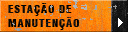
<style>
.page{position:relative;width:128px;height:32px}
.page>*{position:absolute;margin:0}
.t1{font:11px/14px "HelveticaLT-Condensed-Black";letter-spacing:0.08em;color:#000000}
</style>
<div class="page">
<p class="t1" style="left:8px;top:3px;width:72px;height:27px">ESTAÇÃO DE<br>MANUTENÇÃO</p>
</div>
